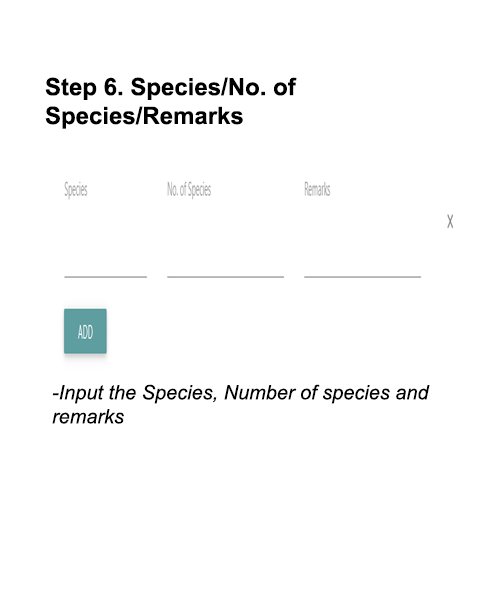
<style>
.page{position:relative;width:500px;height:600px;background:#ffffff}
.page>*{position:absolute;margin:0}
.t1{font:24px "Arial-BoldMT";color:#000000}
.t2{font:20px "Arial-ItalicMT";color:#000000}
</style>
<div class="page">
<p class="t1" style="left:45px;top:77px;width:252px;height:52px">Step 6. Species/No. of Species/Remarks</p>
<p class="t2" style="left:52px;top:384px;width:378px;height:40px">-Input the Species, Number of species and remarks</p>
</div>
